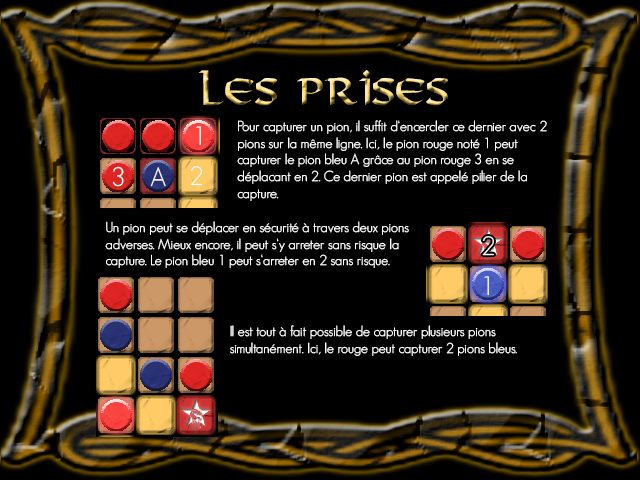
<style>
.page{position:relative;width:640px;height:480px;background:#000000}
.page>*{position:absolute;margin:0}
.t1{font:36px "Viking-Normal"}
.t2{font:26px "GeosansLight";color:#ffffff}
.t3{font:14px "GeosansLight";color:#ffffff}
</style>
<div class="page">
<p class="t1" style="left:198px;top:70px;width:250px;height:36px">Les Prises</p>
<p class="t2" style="left:196px;top:126px;width:5px;height:20px">1</p>
<p class="t3" style="left:237px;top:120px;width:310px;height:81px">Pour capturer un pion, il suffit d‘encercler ce dernier avec 2 pions sur la même ligne. Ici, le pion rouge noté 1 peut capturer le pion bleu A grâce au pion rouge 3 en se déplacant en 2. Ce dernier pion est appelé pilier de la capture.</p>
<p class="t2" style="left:112px;top:166px;width:12px;height:21px">3</p>
<p class="t2" style="left:150px;top:167px;width:16px;height:20px">A</p>
<p class="t2" style="left:190px;top:166px;width:12px;height:20px">2</p>
<p class="t3" style="left:105px;top:221px;width:304px;height:47px">Un pion peut se déplacer en sécurité à travers deux pions adverses. Mieux encore, il peut s‘y arreter sans risque la capture. Le pion bleu 1 peut s‘arreter en 2 sans risque.</p>
<p class="t2" style="left:482px;top:236px;width:12px;height:20px">2</p>
<p class="t2" style="left:484px;top:276px;width:5px;height:20px">1</p>
<p class="t3" style="left:230px;top:325px;width:287px;height:31px">Il est tout à fait possible de capturer plusieurs pions simultanément. Ici, le rouge peut capturer 2 pions bleus.</p>
</div>
